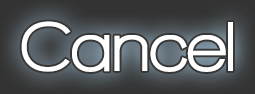
<style>
.page{position:relative;width:255px;height:94px}
.page>*{position:absolute;margin:0}
.t1{font:72px "WalkwayUltraBold";color:#ffffff}
</style>
<div class="page">
<p class="t1" style="left:21px;top:21px;width:212px;height:51px">Cancel</p>
</div>
